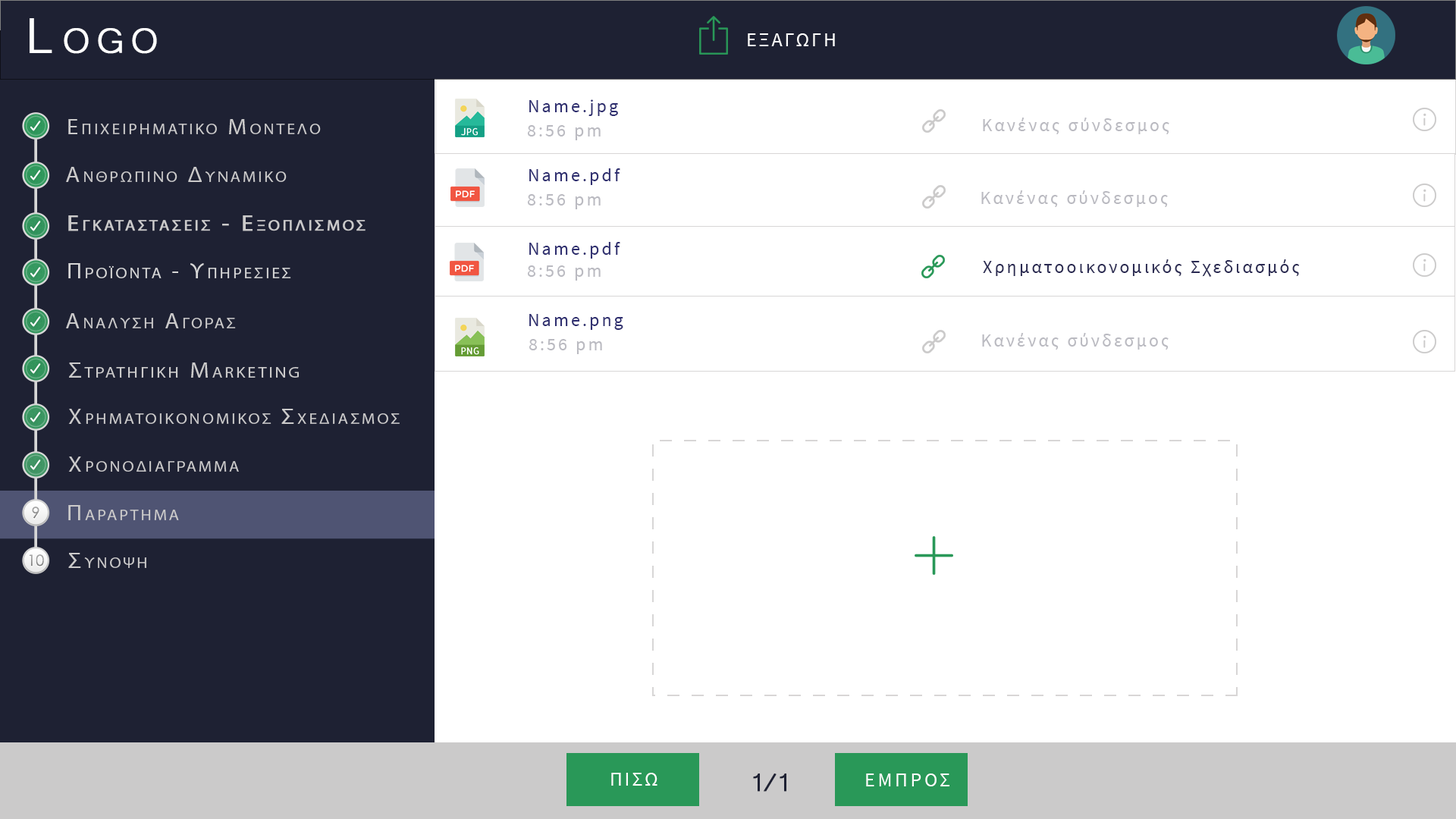
<style>
.page{position:relative;width:1456px;height:819px;background:#ffffff}
.page>*{position:absolute;margin:0}
.t1{font:63.7px "Microsoft-Yi-Baiti";letter-spacing:0.13em;color:#ffffff;font-variant:small-caps;font-weight:bold}
.t2{font:20px "SourceSansPro-Regular";letter-spacing:0.1em;color:#fefefe;text-transform:uppercase}
.t3{font:18.2px "SourceSansPro-Regular";letter-spacing:0.13em;color:#2f2f70}
.t4{font:18.2px "SourceSansPro-Regular";letter-spacing:0.13em;color:#2f2f70;text-transform:uppercase}
.t5{font:18.2px "SourceSansPro-Regular";letter-spacing:0.13em;color:#babac1}
.t6{font:18.2px "SourceSansPro-Regular";letter-spacing:0.13em;color:#2a2a52}
.t7{font:32.8px "Microsoft-Yi-Baiti";letter-spacing:-0.1em;color:#1e2133;font-weight:bold}
.t8{font:20px "SourceSansPro-Regular";letter-spacing:0.13em;color:#fefefe;text-transform:uppercase}
</style>
<div class="page">
<p class="t1" style="left:30px;top:18px;width:127px;height:36px">Logo</p>
<p class="t2" style="left:748px;top:33px;width:87px;height:13px">εξαγωγη</p>
<p class="t3" style="left:529px;top:99px;width:89px;height:17px"><span class="t4">N</span>ame.jpg</p>
<p class="t5" style="left:527px;top:125px;width:74px;height:15px">8:56 pm</p>
<p class="t5" style="left:983px;top:118px;width:186px;height:16px">Κανένας σύνδεσμος</p>
<p class="t3" style="left:529px;top:168px;width:91px;height:17px"><span class="t4">N</span>ame.pdf</p>
<p class="t5" style="left:527px;top:194px;width:74px;height:15px">8:56 pm</p>
<p class="t5" style="left:981px;top:190px;width:187px;height:17px">Κανένας σύνδεσμος</p>
<p class="t3" style="left:529px;top:242px;width:91px;height:17px"><span class="t4">N</span>ame.pdf</p>
<p class="t5" style="left:527px;top:265px;width:74px;height:16px">8:56 pm</p>
<p class="t6" style="left:983px;top:259px;width:317px;height:18px">Χρηματοοικονομικός Σχεδιασμός</p>
<p class="t3" style="left:529px;top:314px;width:94px;height:16px"><span class="t4">N</span>ame.png</p>
<p class="t5" style="left:529px;top:339px;width:73px;height:15px">8:56 pm</p>
<p class="t5" style="left:982px;top:333px;width:187px;height:17px">Κανένας σύνδεσμος</p>
<p class="t2" style="left:611px;top:773px;width:46px;height:13px">Πισω</p>
<p class="t7" style="left:753px;top:773px;width:33px;height:19px">1/1</p>
<p class="t8" style="left:866px;top:773px;width:83px;height:13px">εμπροσ</p>
</div>
